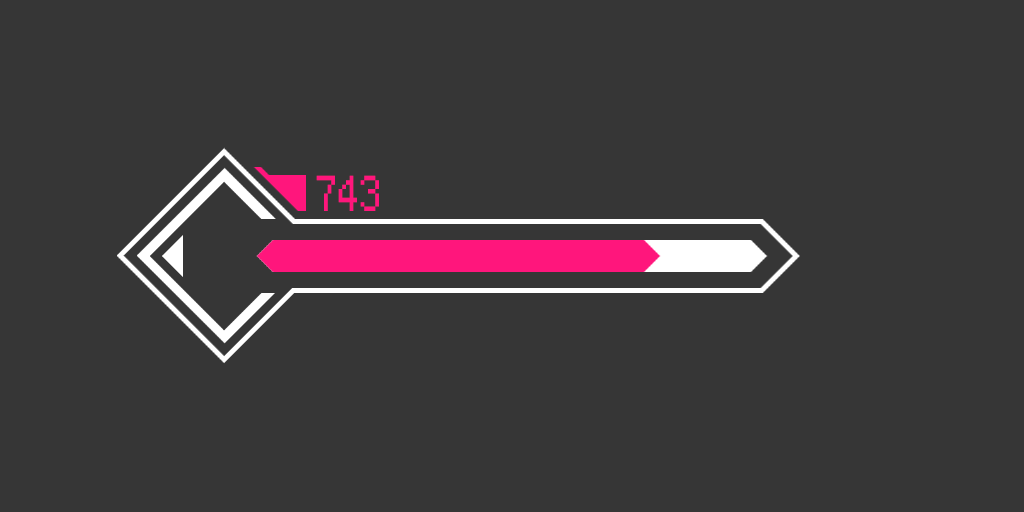
<style>
.page{position:relative;width:1024px;height:512px;background:#363636}
.page>*{position:absolute;margin:0}
.t1{font:46.9px "Small Fonts";color:#ff167c}
</style>
<div class="page">
<p class="t1" style="left:316px;top:175px;width:63px;height:36px">743</p>
</div>
